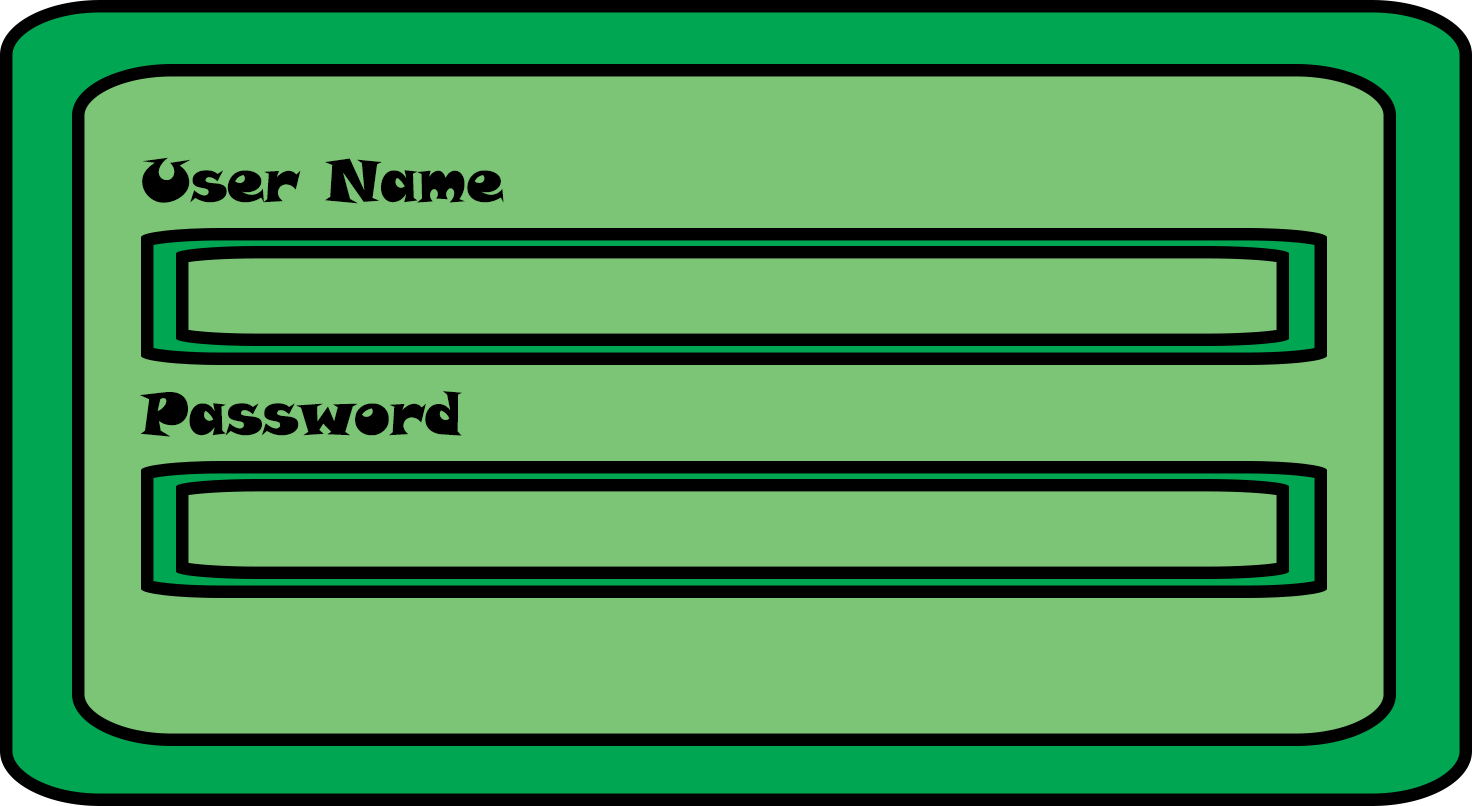
<style>
.page{position:relative;width:1472px;height:806px;background:#7cc576}
.page>*{position:absolute;margin:0}
.t1{font:59.4px "SnapITC-Regular";color:#000000}
</style>
<div class="page">
<p class="t1" style="left:142px;top:157px;width:362px;height:47px">User Name</p>
<p class="t1" style="left:140px;top:391px;width:322px;height:46px">Password</p>
</div>
